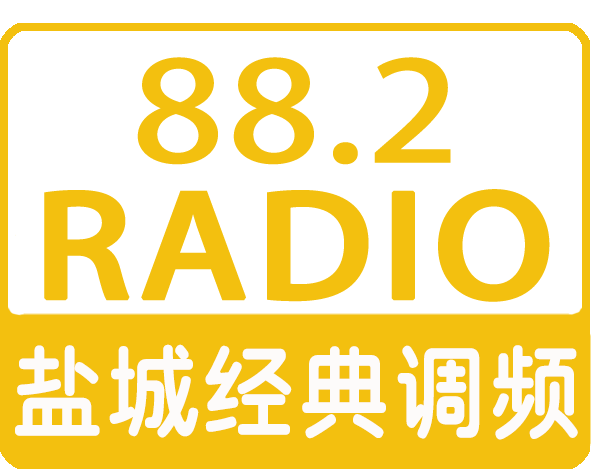
<style>
.page{position:relative;width:591px;height:473px;background:#ffffff}
.page>*{position:absolute;margin:0}
.t1{font:137.5px/135.4px "AdobeHeitiStd-Regular";letter-spacing:0.02em;color:#f3c00f;font-weight:bold;scale:1.2 1}
.t2{font:137.5px/135.4px "AdobeHeitiStd-Regular";letter-spacing:0.02em;color:#f3c00f;scale:1.2 1}
.t3{font:104.2px "SJyuantijian-C-Regular";letter-spacing:0.02em;color:#fdfbfa;scale:0.9 1}
</style>
<div class="page">
<p class="t1" style="left:44px;top:57px;width:506px;height:245px;text-align:center"><span class="t2">88.2<br></span>RADIO</p>
<p class="t3" style="left:15px;top:344px;width:563px;height:96px">盐城经典调频</p>
</div>
